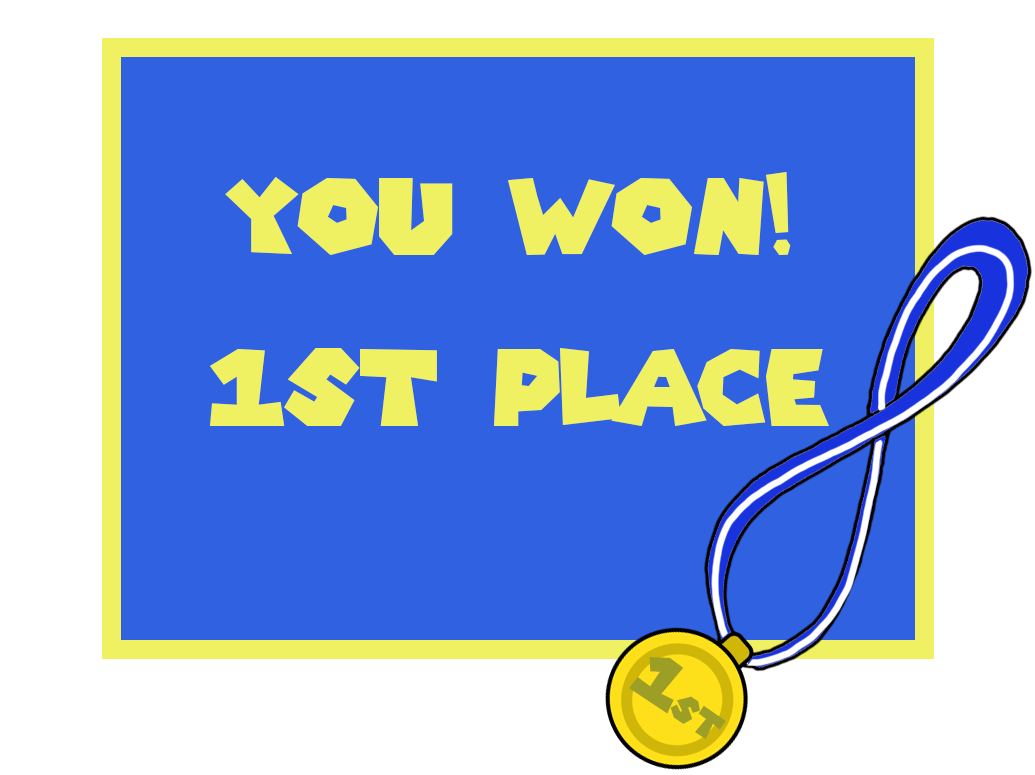
<style>
.page{position:relative;width:1035px;height:775px;background:#2f61e1}
.page>*{position:absolute;margin:0}
.t1{font:104.2px/171px "SuperMarioGalaxy";color:#eff163}
.t2{font:36.1px "SuperMarioGalaxy";color:#9d9e26}
.t3{font:64.4px "SuperMarioGalaxy";color:#9d9e26}
</style>
<div class="page">
<p class="t1" style="left:210px;top:172px;width:619px;height:254px;text-align:center">You WON!<br>1st place</p>
<p class="t2" style="left:629px;top:657px;width:97px;height:83px;rotate:34deg"><span class="t3">1</span>st</p>
</div>
